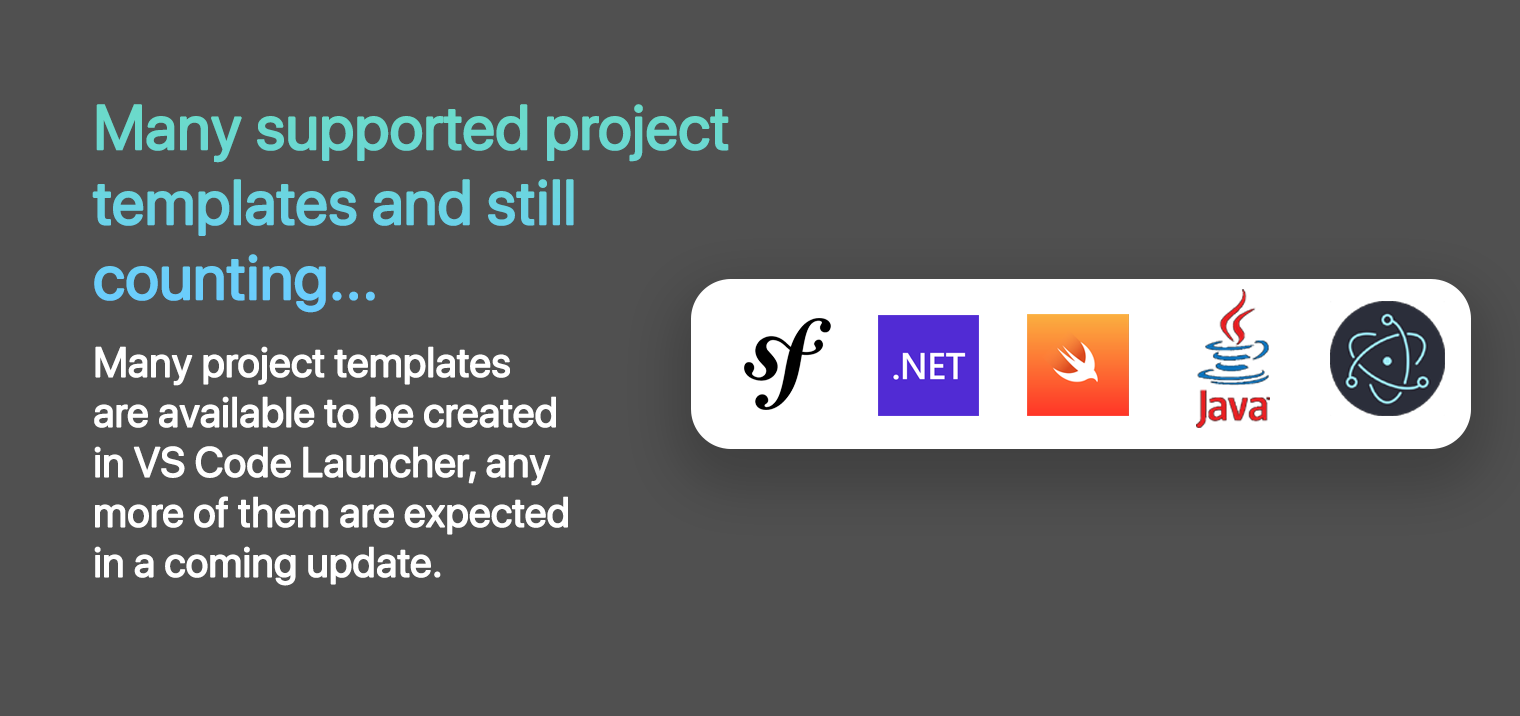
<style>
.page{position:relative;width:1520px;height:716px;background:#505050}
.page>*{position:absolute;margin:0}
.t1{font:62.5px "SFProDisplay-Regular";color:#6bd5df;font-weight:bold}
.t2{font:41.7px "SFProDisplay-Regular";color:#ffffff;font-weight:bold}
</style>
<div class="page">
<p class="t1" style="left:92px;top:104px;width:637px;height:209px">Many supported project <br>templates and still<br>counting...</p>
<p class="t2" style="left:94px;top:346px;width:474px;height:240px">Many project templates<br>are available to be created<br>in VS Code Launcher, any<br>more of them are expected<br>in a coming update.</p>
</div>
